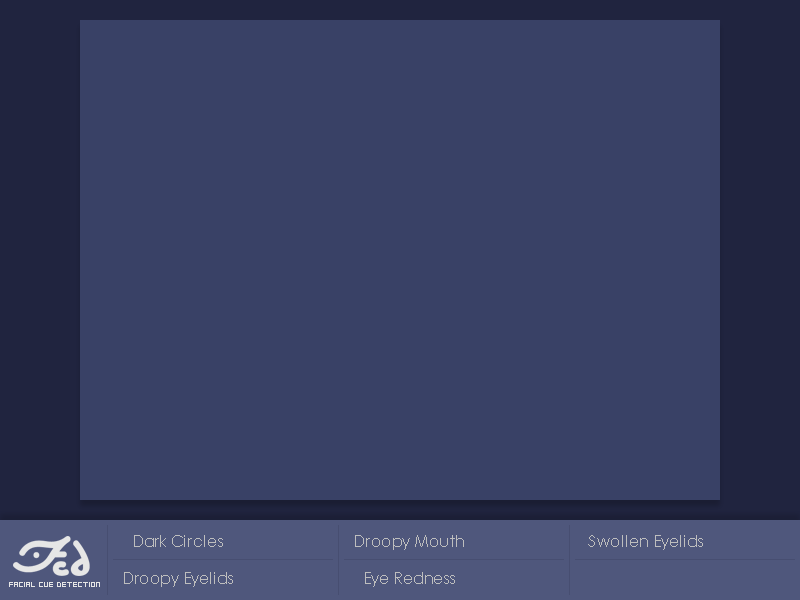
<style>
.page{position:relative;width:800px;height:600px;background:#394166}
.page>*{position:absolute;margin:0}
.t1{font:15.9px "CenturyGothic";color:#bebebe}
.t2{font:7.7px "GoodbyeDespair";color:#e6e6e6}
</style>
<div class="page">
<p class="t1" style="left:134px;top:535px;width:89px;height:12px">Dark Circles</p>
<p class="t1" style="left:355px;top:535px;width:109px;height:15px">Droopy Mouth</p>
<p class="t1" style="left:588px;top:535px;width:115px;height:15px">Swollen Eyelids</p>
<p class="t2" style="left:9px;top:582px;width:91px;height:5px">Facial Cue detection</p>
<p class="t1" style="left:124px;top:572px;width:109px;height:15px">Droopy Eyelids</p>
<p class="t1" style="left:365px;top:572px;width:90px;height:15px">Eye Redness</p>
</div>
